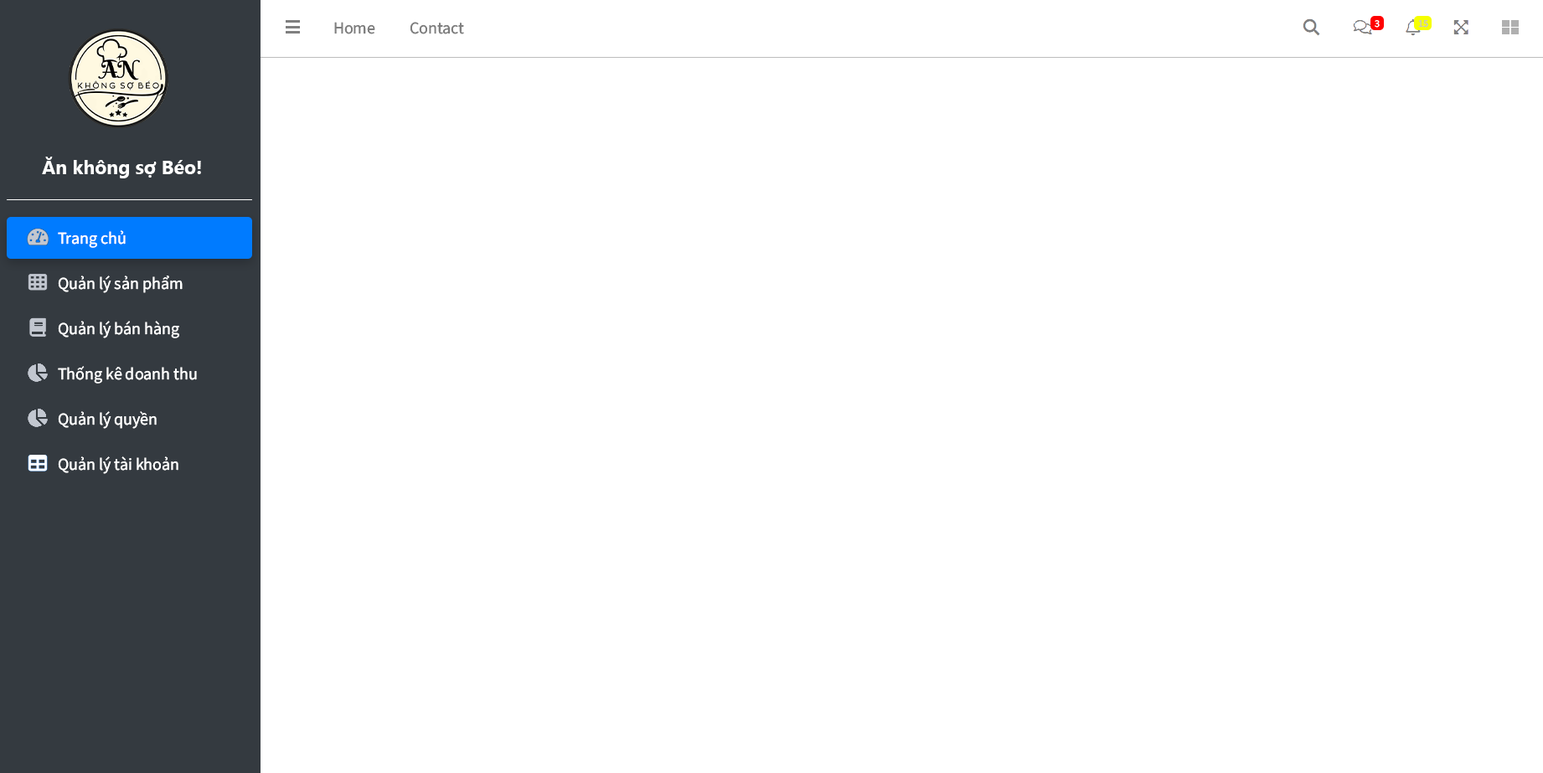
<style>
.page{position:relative;width:1543px;height:773px;background:#ffffff}
.page>*{position:absolute;margin:0}
.t1{font:16.7px "SourceSansRoman-Regular";color:#7f7f7f}
.t2{font:10px "SourceSansRoman-Regular";color:#ffffff}
.t3{font:10px "SourceSansRoman-Regular";color:#c3c3c3}
.t4{font:19.3px "SegoeUI-Bold";color:#ffffff}
.t5{font:16.7px "SourceSansRoman-Regular";color:#ffffff}
</style>
<div class="page">
<p class="t1" style="left:334px;top:22px;width:41px;height:12px">Home</p>
<p class="t1" style="left:410px;top:22px;width:54px;height:12px">Contact</p>
<p class="t2" style="left:1374px;top:20px;width:5px;height:8px">3</p>
<p class="t3" style="left:1418px;top:20px;width:10px;height:8px">15</p>
<p class="t4" style="left:42px;top:157px;width:159px;height:21px">Ăn không sợ Béo!</p>
<p class="t5" style="left:58px;top:230px;width:68px;height:18px">Trang chủ</p>
<p class="t5" style="left:58px;top:276px;width:125px;height:17px">Quản lý sản phẩm</p>
<p class="t5" style="left:58px;top:321px;width:121px;height:17px">Quản lý bán hàng</p>
<p class="t5" style="left:58px;top:366px;width:139px;height:18px">Thống kê doanh thu</p>
<p class="t5" style="left:58px;top:411px;width:99px;height:18px">Quản lý quyền</p>
<p class="t5" style="left:58px;top:456px;width:120px;height:18px">Quản lý tài khoản</p>
</div>
